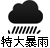
<style>
.page{position:relative;width:50px;height:48px;background:#ffffff}
.page>*{position:absolute;margin:0}
.t1{font:12px "OPPOSans-R";color:#000000}
</style>
<div class="page">
<p class="t1" style="left:1px;top:36px;width:47px;height:11px">特大暴雨</p>
</div>
